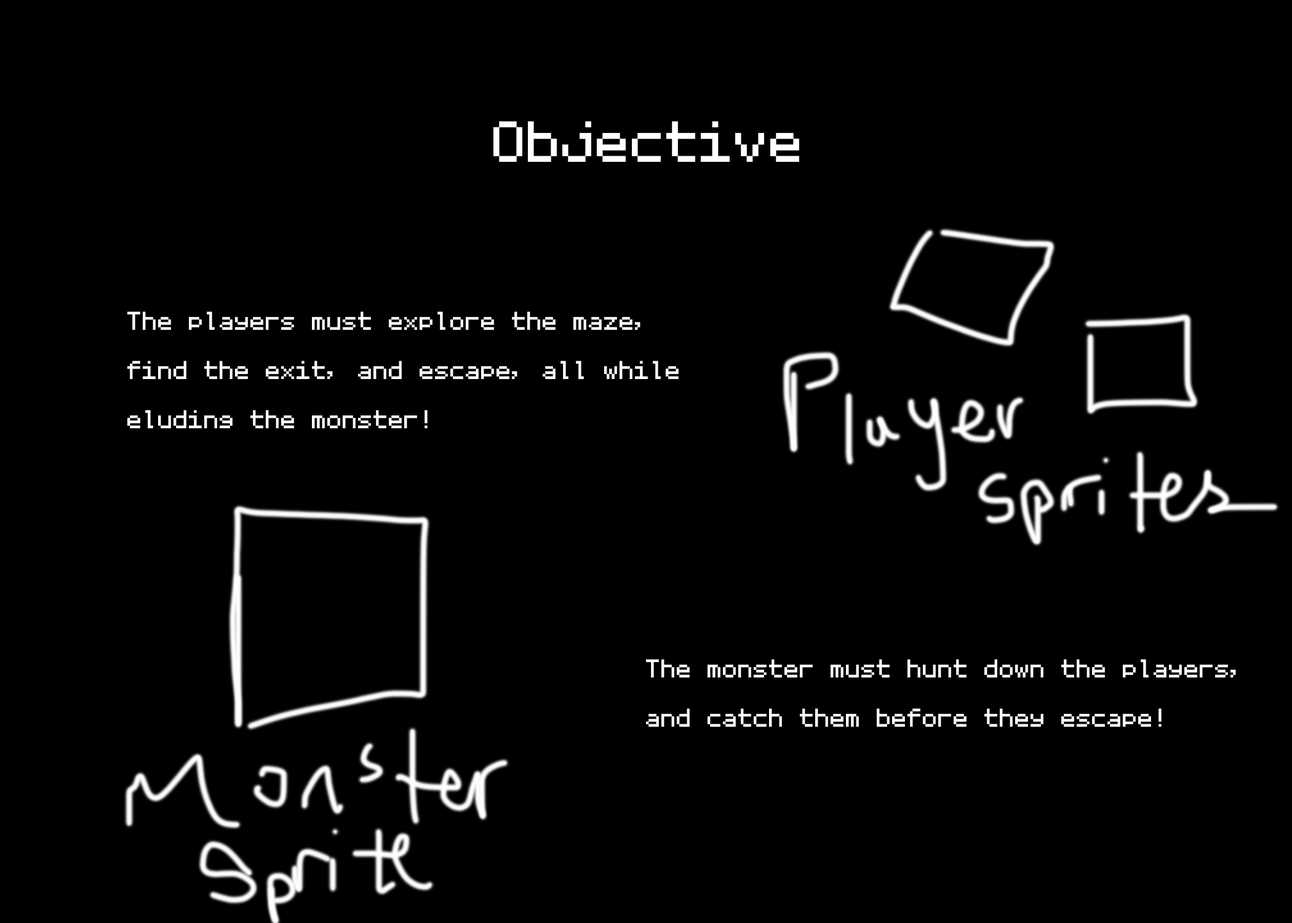
<style>
.page{position:relative;width:1292px;height:923px;background:#000000}
.page>*{position:absolute;margin:0}
.t1{font:92.3px "MozartNBP";color:#ffffff}
.t2{font:41px "MozartNBP";color:#ffffff}
</style>
<div class="page">
<p class="t1" style="left:493px;top:121px;width:306px;height:41px">Objective</p>
<p class="t2" style="left:127px;top:311px;width:552px;height:117px">The players must explore the maze,<br>find the exit, and escape, all while <br>eluding the monster!</p>
<p class="t2" style="left:646px;top:659px;width:590px;height:68px">The monster must hunt down the players,<br>and catch them before they escape!</p>
</div>
